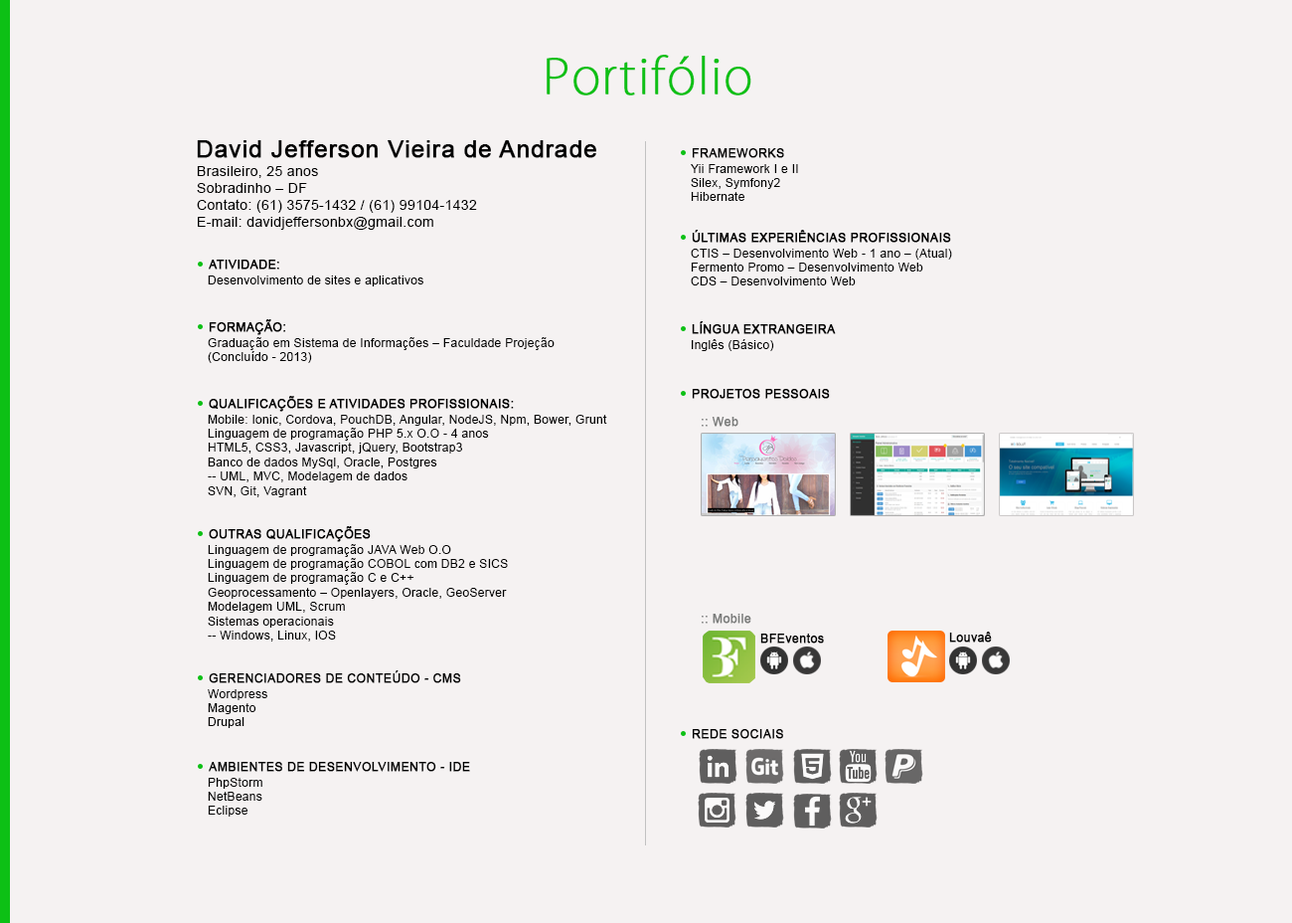
<style>
.page{position:relative;width:1292px;height:923px;background:#f5f2f2}
.page>*{position:absolute;margin:0}
.t1{font:47.7px "KozGoPro-ExtraLight";letter-spacing:0.025em;color:#0dc015;font-weight:bold}
.t2{font:23.9px "ArialMT";letter-spacing:0.025em;color:#000000;font-weight:bold}
.t3{font:11.9px "ArialMT";letter-spacing:0.025em;color:#000000;font-weight:bold}
.t4{font:13.9px "ArialMT";letter-spacing:0.025em;color:#000000}
.t5{font:11.9px "ArialMT";letter-spacing:0.025em;color:#000000}
.t6{font:11.9px "ArialMT";letter-spacing:0.025em;color:#7c7d7c;font-weight:bold}
.t7{font:11.9px "ArialMT";letter-spacing:0.025em;color:#000101;font-weight:bold}
</style>
<div class="page">
<p class="t1" style="left:547px;top:55px;width:205px;height:40px">Portifólio</p>
<p class="t2" style="left:197px;top:140px;width:400px;height:18px">David Jefferson Vieira de Andrade</p>
<p class="t3" style="left:692px;top:148px;width:92px;height:10px">FRAMEWORKS</p>
<p class="t4" style="left:197px;top:166px;width:280px;height:64px">Brasileiro, 25 anos<br>Sobradinho – DF<br>Contato: (61) 3575-1432 / (61) 99104-1432<br>E-mail: davidjeffersonbx@gmail.com</p>
<p class="t5" style="left:691px;top:164px;width:107px;height:37px">Yii​ Framework I e II<br>Silex, Symfony2<br>Hibernate</p>
<p class="t3" style="left:692px;top:230px;width:259px;height:13px">ÚLTIMAS EXPERIÊNCIAS PROFISSIONAIS</p>
<p class="t5" style="left:691px;top:249px;width:261px;height:36px">CTIS – Desenvolvimento Web - 1 ano – (Atual)<br>Fermento Promo – Desenvolvimento Web<br>CDS – Desenvolvimento Web</p>
<p class="t3" style="left:209px;top:259px;width:70px;height:10px">ATIVIDADE:</p>
<p class="t5" style="left:208px;top:275px;width:216px;height:11px">Desenvolvimento de sites e aplicativos</p>
<p class="t3" style="left:209px;top:319px;width:76px;height:16px">FORMAÇÃO:</p>
<p class="t3" style="left:692px;top:321px;width:144px;height:13px">LÍNGUA EXTRANGEIRA</p>
<p class="t5" style="left:208px;top:337px;width:347px;height:26px">Graduação em Sistema de Informações – Faculdade Projeção <br>(Concluído - 2013)</p>
<p class="t5" style="left:692px;top:339px;width:82px;height:12px">Inglês (Básico)</p>
<p class="t3" style="left:692px;top:389px;width:138px;height:10px">PROJETOS PESSOAIS</p>
<p class="t3" style="left:209px;top:396px;width:305px;height:16px">QUALIFICAÇÕES E ATIVIDADES PROFISSIONAIS:</p>
<p class="t5" style="left:208px;top:415px;width:399px;height:82px">Mobile: Ionic, Cordova, PouchDB, Angular, NodeJS, Npm, Bower, Grunt<br>Linguagem de programação PHP 5.x O.O - 4 anos<br>HTML5, CSS3, Javascript, jQuery, Bootstrap3<br>Banco de dados MySql, Oracle, Postgres<br>-- UML, MVC, Modelagem de dados<br>SVN, Git, Vagrant</p>
<p class="t6" style="left:702px;top:417px;width:37px;height:10px">:: Web</p>
<p class="t3" style="left:209px;top:526px;width:162px;height:16px">OUTRAS QUALIFICAÇÕES</p>
<p class="t5" style="left:208px;top:544px;width:300px;height:97px">Linguagem de programação JAVA Web O.O<br>Linguagem de programação COBOL com DB2 e SICS<br>Linguagem de programação C e C++<br>Geoprocessamento – Openlayers, Oracle, GeoServer<br>Modelagem UML, Scrum<br>Sistemas operacionais<br>-- Windows, Linux, IOS</p>
<p class="t6" style="left:702px;top:613px;width:50px;height:10px">:: Mobile</p>
<p class="t7" style="left:761px;top:633px;width:63px;height:10px">BFEventos</p>
<p class="t7" style="left:949px;top:631px;width:43px;height:11px">Louvaê</p>
<p class="t3" style="left:209px;top:670px;width:252px;height:13px">GERENCIADORES DE CONTEÚDO - CMS</p>
<p class="t5" style="left:208px;top:689px;width:59px;height:39px">Wordpress<br>Magento<br>Drupal</p>
<p class="t3" style="left:692px;top:729px;width:91px;height:10px">REDE SOCIAIS</p>
<p class="t3" style="left:209px;top:762px;width:261px;height:9px">AMBIENTES DE DESENVOLVIMENTO - IDE</p>
<p class="t5" style="left:208px;top:777px;width:54px;height:39px">PhpStorm<br>NetBeans<br>Eclipse</p>
</div>
